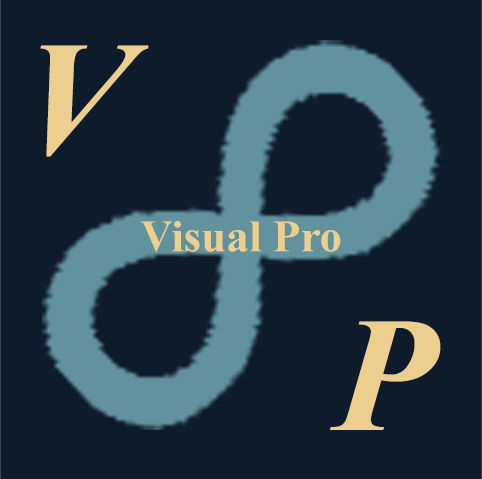
<style>
.page{position:relative;width:482px;height:479px;background:#0d1b2a}
.page>*{position:absolute;margin:0}
.t1{font:163.7px "TimesNewRomanPS-BoldItalicMT";color:#ecce8e}
.t2{font:45.1px "TimesNewRomanPS-BoldMT";color:#ecce8e}
</style>
<div class="page">
<p class="t1" style="left:40px;top:45px;width:109px;height:112px">V</p>
<p class="t2" style="left:141px;top:221px;width:200px;height:31px">Visual Pro</p>
<p class="t1" style="left:330px;top:321px;width:111px;height:109px">P</p>
</div>
